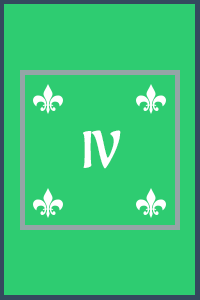
<style>
.page{position:relative;width:200px;height:300px;background:#2ecc71}
.page>*{position:absolute;margin:0}
.t1{font:50.4px "Aladin-Regular";color:#ffffff}
</style>
<div class="page">
<p class="t1" style="left:83px;top:130px;width:38px;height:39px">IV</p>
</div>
